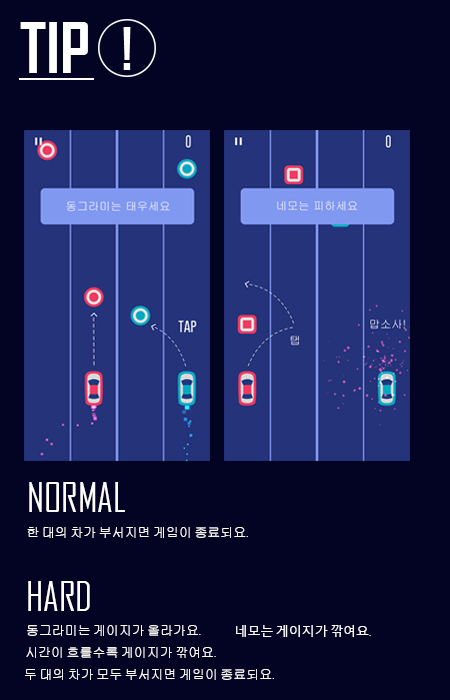
<style>
.page{position:relative;width:450px;height:700px;background:#030424}
.page>*{position:absolute;margin:0}
.t1{font:66.7px "AgencyFB-Bold";color:#ffffff}
.t2{font:38.8px "AgencyFB-Reg";color:#ffffff}
.t3{font:12.9px "Gulim";color:#ffffff}
.t4{font:12.9px "AgencyFB-Reg";color:#ffffff}
.t5{font:12.9px "MalgunGothicRegular";color:#ffffff}
</style>
<div class="page">
<p class="t1" style="left:20px;top:22px;width:68px;height:51px">TIP</p>
<p class="t2" style="left:29px;top:482px;width:96px;height:30px">NORMAL</p>
<p class="t3" style="left:27px;top:527px;width:221px;height:11px">한 대의 차가 부서지면 게임이 종료되요<span class="t4">.</span></p>
<p class="t2" style="left:28px;top:581px;width:62px;height:30px">HARD</p>
<p class="t3" style="left:27px;top:625px;width:174px;height:11px">동그라미는 게이지가 올라가요<span class="t4">.</span></p>
<p class="t5" style="left:236px;top:625px;width:135px;height:12px">네모는 게이지가 깎여요<span class="t4">.</span></p>
<p class="t3" style="left:26px;top:647px;width:190px;height:11px">시간이 흐를수록 게이지가 깎여요<span class="t4">.</span></p>
<p class="t3" style="left:25px;top:669px;width:249px;height:11px">두 대의 차가 모두 부서지면 게임이 종료되요<span class="t4">.</span></p>
</div>
